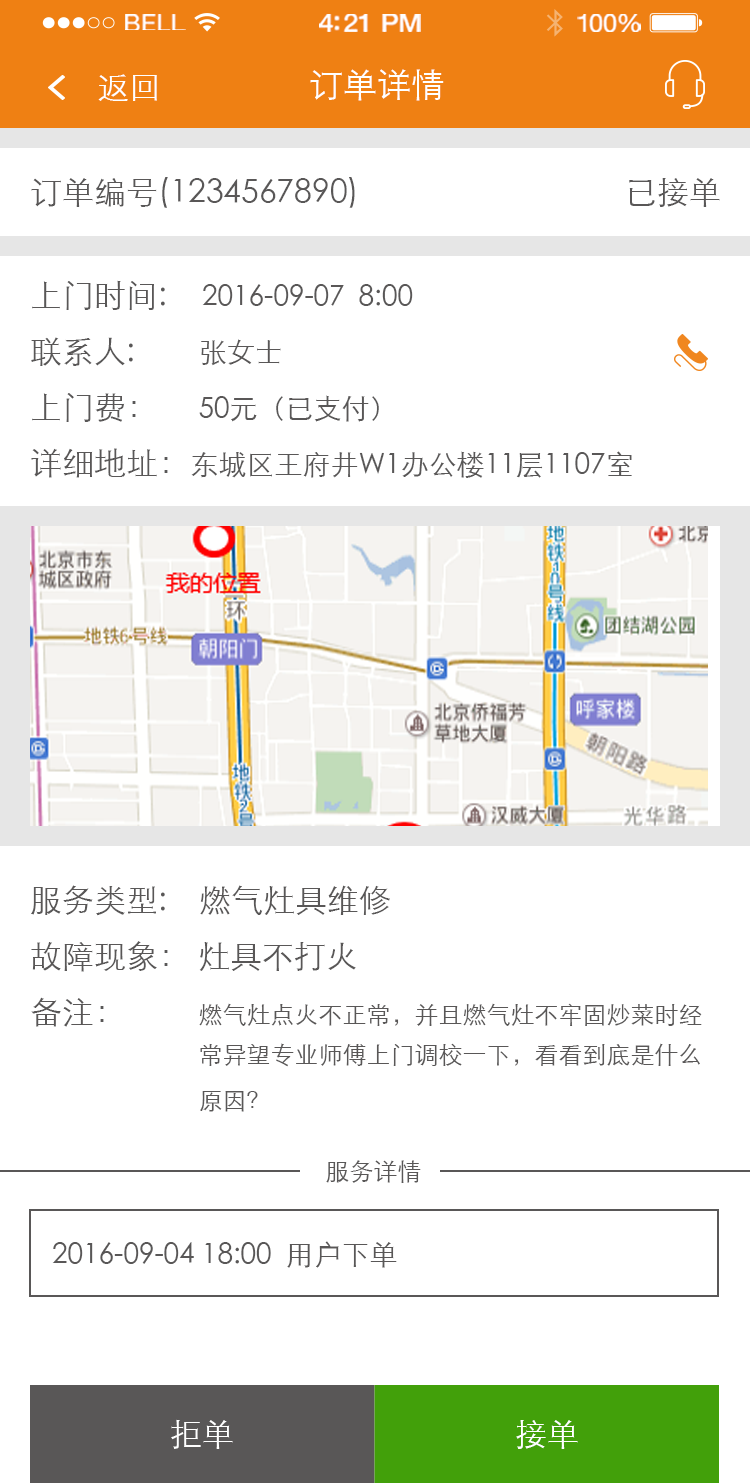
<style>
.page{position:relative;width:750px;height:1483px;background:#ffffff}
.page>*{position:absolute;margin:0}
.t1{font:23.3px "HelveticaNeue";letter-spacing:0.02em;color:#ffffff;scale:1.06 1}
.t2{font:25.3px "HelveticaNeue-Medium";letter-spacing:-0.02em;color:#ffffff;scale:1.06 1}
.t3{font:24.3px "HelveticaNeue";letter-spacing:-0.02em;color:#ffffff;scale:1.06 1}
.t4{font:32px "STXihei";color:#ffffff}
.t5{font:34px "STXihei";color:#ffffff}
.t6{font:32px "STXihei";color:#595757}
.t7{font:28px/56px "STXihei";color:#595757}
.t8{font:32px/56px "STXihei";color:#595757}
.t9{font:28px "STXihei";color:#595757}
.t10{font:24px/46px "STXihei";color:#595757}
.t11{font:32px/46px "STXihei";color:#595757}
.t12{font:24px/56px "STXihei";color:#595757}
.t13{font:24.5px "STXihei";color:#595757}
</style>
<div class="page">
<p class="t1" style="left:125px;top:14px;width:61px;height:16px">BELL</p>
<p class="t2" style="left:319px;top:14px;width:102px;height:18px">4:21 PM</p>
<p class="t3" style="left:577px;top:14px;width:64px;height:18px">100%</p>
<p class="t4" style="left:98px;top:74px;width:59px;height:27px">返回</p>
<p class="t5" style="left:310px;top:69px;width:134px;height:32px">订单详情</p>
<p class="t6" style="left:31px;top:177px;width:324px;height:31px">订单编号(1234567890)</p>
<p class="t6" style="left:629px;top:178px;width:91px;height:29px">已接单</p>
<p class="t7" style="left:31px;top:280px;width:601px;height:198px"><span class="t8">上门时间:<br>联系人:        </span>张女士<br><span class="t8">上门费：     </span>50元（已支付）<br><span class="t8">详细地址：</span>东城区王府井W1办公楼11层1107室</p>
<p class="t9" style="left:202px;top:284px;width:211px;height:22px">2016-09-07  8:00</p>
<p class="t10" style="left:31px;top:885px;width:671px;height:227px"><span class="t8">服务类型:    燃气灶具维修<br>故障现象： 灶具不打火<br></span><span class="t11">备注：         </span>燃气灶点火不正常，并且燃气灶不牢固炒菜时经<br>                            常异望专业师傅上门调校一下，看看到底是什么<br>                            原因<span class="t12">？</span></p>
<p class="t13" style="left:326px;top:1160px;width:95px;height:23px">服务详情</p>
<p class="t9" style="left:52px;top:1241px;width:345px;height:27px">2016-09-04 18:00  用户下单</p>
<p class="t4" style="left:171px;top:1419px;width:62px;height:30px">拒单</p>
<p class="t4" style="left:516px;top:1420px;width:62px;height:29px">接单</p>
</div>
